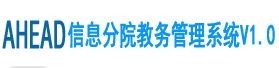
<style>
.page{position:relative;width:279px;height:68px;background:#ffffff}
.page>*{position:absolute;margin:0}
.t1{font:36px "FZYTK--GBK1-0";color:#0a67a7;font-weight:bold;scale:0.6 1}
.t2{font:28px "SimHei";color:#0696fb;font-weight:bold;scale:0.6 1}
</style>
<div class="page">
<p class="t1" style="left:2px;top:20px;width:64px;height:29px">AHEAD</p>
<p class="t2" style="left:67px;top:21px;width:208px;height:27px">信息分院教务管理系统V1.0</p>
</div>
